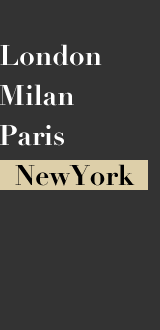
<style>
.page{position:relative;width:160px;height:330px;background:#333333}
.page>*{position:absolute;margin:0}
.t1{font:28px/20px "Didot-Bold";color:#ffffff}
.t2{font:28px/20px "Didot-Bold";color:#e7745a}
.t3{font:28px "Didot-Bold";color:#000000}
</style>
<div class="page">
<p class="t1" style="left:0px;top:44px;width:102px;height:102px"><span class="t2"><br><br></span>London<br><br>Milan<br><br>Paris</p>
<p class="t3" style="left:15px;top:164px;width:120px;height:22px">NewYork</p>
</div>
